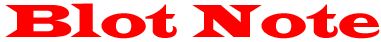
<style>
.page{position:relative;width:381px;height:42px;background:#ffffff}
.page>*{position:absolute;margin:0}
.t1{font:48px "LatinWide";color:#fe0000}
</style>
<div class="page">
<p class="t1" style="left:5px;top:3px;width:375px;height:36px">Blot Note</p>
</div>
